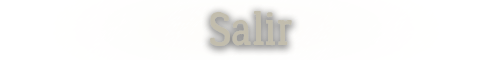
<style>
.page{position:relative;width:500px;height:60px;background:#ffffff}
.page>*{position:absolute;margin:0}
.t1{font:45.8px "LumberjackRough";color:#c2bdad}
</style>
<div class="page">
<p class="t1" style="left:210px;top:11px;width:82px;height:35px">Salir</p>
</div>
